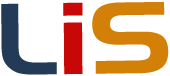
<style>
.page{position:relative;width:170px;height:76px;background:#ffffff}
.page>*{position:absolute;margin:0}
.t1{font:98.5px "HandelGothicBT-Regular";color:#233b56;scale:1.13 1}
.t2{font:93.3px "Tahoma-Bold";color:#c80707;scale:1.13 1}
.t3{font:98.5px "HandelGothicBT-Regular";color:#d38008;scale:1.13 1}
</style>
<div class="page">
<p class="t1" style="left:1px;top:1px;width:168px;height:74px;rotate:-1deg">L<span class="t2">i</span><span class="t3">S</span></p>
</div>
